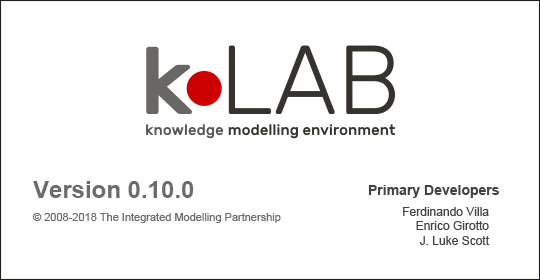
<style>
.page{position:relative;width:540px;height:280px;background:#ffffff}
.page>*{position:absolute;margin:0}
.t1{font:24px "Arial-BoldMT";color:#6e6b6b}
.t2{font:14px "Arial-BoldMT";color:#424242}
.t3{font:12px "ArialMT";color:#424242}
.t4{font:11px "ArialMT";color:#6b6b6b}
</style>
<div class="page">
<p class="t1" style="left:33px;top:181px;width:161px;height:17px">Version 0.10.0</p>
<p class="t2" style="left:368px;top:185px;width:131px;height:13px">Primary Developers</p>
<p class="t3" style="left:403px;top:207px;width:86px;height:38px;text-align:right">Ferdinando Villa<br>Enrico Girotto<br>J. Luke Scott</p>
<p class="t4" style="left:32px;top:213px;width:249px;height:10px">© 2008-2018 The Integrated Modelling Partnership</p>
</div>
